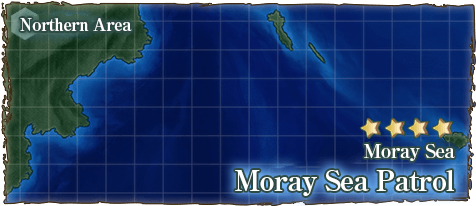
<style>
.page{position:relative;width:476px;height:206px}
.page>*{position:absolute;margin:0}
.t1{font:17px "RyuminPro-ExBold";letter-spacing:-0.04em;color:#ffffff}
.t2{font:19px "RyuminPro-ExBold";letter-spacing:-0.04em;color:#ffffff}
.t3{font:28px "RyuminPro-ExBold";letter-spacing:-0.04em;color:#ffffff}
</style>
<div class="page">
<p class="t1" style="left:20px;top:18px;width:112px;height:13px">Northern Area</p>
<p class="t2" style="left:364px;top:143px;width:91px;height:18px">Moray Sea</p>
<p class="t3" style="left:235px;top:170px;width:219px;height:26px">Moray Sea Patrol</p>
</div>
